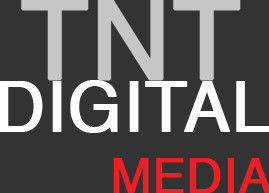
<style>
.page{position:relative;width:269px;height:193px;background:#333333}
.page>*{position:absolute;margin:0}
.t1{font:110px "Helvetica";color:#c6c6c6;font-weight:bold}
.t2{font:69px "Helvetica";color:#ffffff;font-weight:bold}
</style>
<div class="page">
<p class="t1" style="left:21px;top:0px;width:220px;height:81px">TNT</p>
<p class="t2" style="left:0px;top:80px;width:270px;height:53px">DIGITAL</p>
</div>
